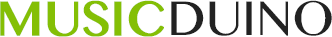
<style>
.page{position:relative;width:332px;height:37px;background:#ffffff}
.page>*{position:absolute;margin:0}
.t1{font:58px "KhmerMN";color:#84bf05;font-weight:bold}
.t2{font:58px "KhmerMN";color:#222222}
</style>
<div class="page">
<p class="t1" style="left:0px;top:0px;width:332px;height:37px">MUSIC<span class="t2">DUINO</span></p>
</div>
